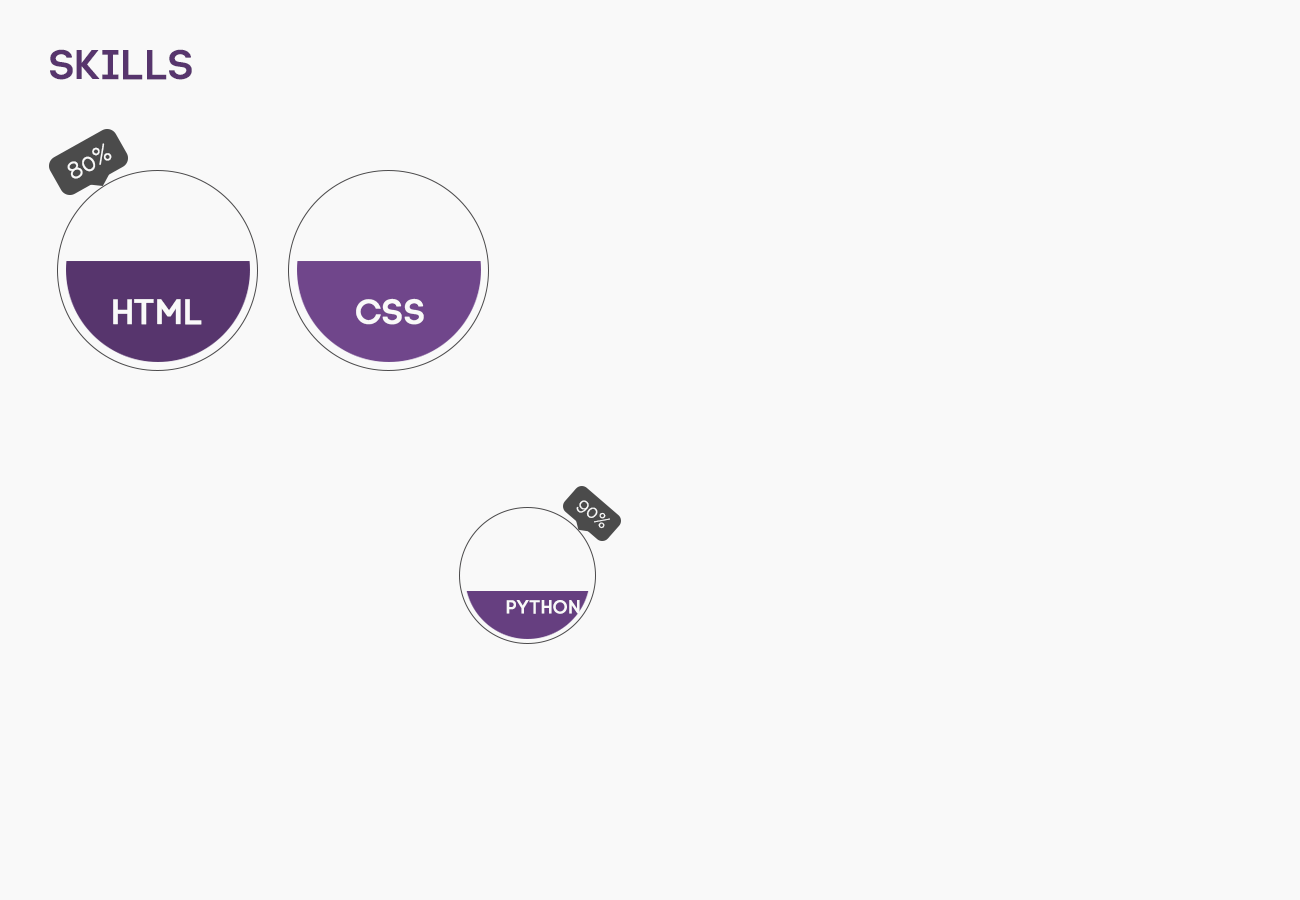
<style>
.page{position:relative;width:1300px;height:900px;background:#f9f9f9}
.page>*{position:absolute;margin:0}
.t1{font:72px "Code-Pro-Demo";letter-spacing:0.01em;color:#57356d;font-weight:bold}
.t2{font:40px "Raleway-Light";letter-spacing:0.01em;color:#f9f9f9;font-weight:bold}
.t3{font:60px "Code-Pro-Demo";letter-spacing:0.01em;color:#f9f9f9;font-weight:bold}
.t4{font:30px "Raleway-Light";letter-spacing:0.01em;color:#f9f9f9;font-weight:bold}
.t5{font:32px "Code-Pro-Demo";letter-spacing:0.01em;color:#f9f9f9;font-weight:bold}
</style>
<div class="page">
<p class="t1" style="left:50px;top:49px;width:142px;height:31px">Skills</p>
<p class="t2" style="left:67px;top:143px;width:45px;height:36px;rotate:-29deg">80%</p>
<p class="t3" style="left:113px;top:299px;width:89px;height:26px">html</p>
<p class="t3" style="left:356px;top:298px;width:68px;height:27px">css</p>
<p class="t4" style="left:576px;top:500px;width:34px;height:29px;rotate:41deg">90%</p>
<p class="t5" style="left:506px;top:600px;width:74px;height:14px">Python</p>
</div>
